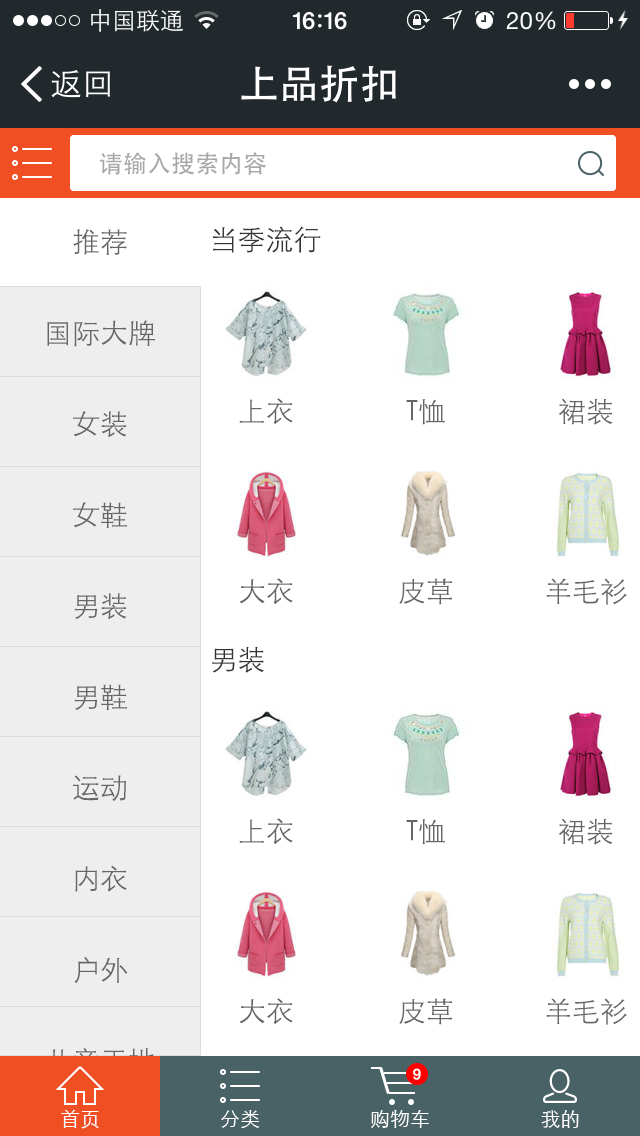
<style>
.page{position:relative;width:640px;height:1136px;background:#ffffff}
.page>*{position:absolute;margin:0}
.t1{font:24px "STHeiti";color:#a8a8a8}
.t2{font:28px/91px "STXihei";color:#666666}
.t3{font:28px "STXihei";color:#333333}
.t4{font:28px "STXihei";color:#666666}
.t5{font:15px "Helvetica";color:#ffffff}
.t6{font:20px "STXihei";color:#ffffff}
</style>
<div class="page">
<p class="t1" style="left:100px;top:152px;width:166px;height:23px">请输入搜索内容</p>
<p class="t2" style="left:46px;top:229px;width:110px;height:845px;text-align:center">推荐<br>国际大牌<br>女装<br>女鞋<br>男装<br>男鞋<br>运动<br>内衣<br>户外<br>儿童天地<br>箱包配饰</p>
<p class="t3" style="left:213px;top:226px;width:108px;height:27px">当季流行</p>
<p class="t4" style="left:239px;top:398px;width:54px;height:27px">上衣</p>
<p class="t4" style="left:406px;top:399px;width:39px;height:26px">T恤</p>
<p class="t4" style="left:559px;top:398px;width:54px;height:27px">裙装</p>
<p class="t4" style="left:239px;top:578px;width:54px;height:27px">大衣</p>
<p class="t4" style="left:399px;top:578px;width:53px;height:27px">皮草</p>
<p class="t4" style="left:546px;top:578px;width:81px;height:27px">羊毛衫</p>
<p class="t3" style="left:212px;top:646px;width:52px;height:27px">男装</p>
<p class="t4" style="left:239px;top:818px;width:54px;height:27px">上衣</p>
<p class="t4" style="left:406px;top:819px;width:39px;height:26px">T恤</p>
<p class="t4" style="left:559px;top:818px;width:54px;height:27px">裙装</p>
<p class="t4" style="left:239px;top:998px;width:54px;height:27px">大衣</p>
<p class="t4" style="left:399px;top:998px;width:53px;height:27px">皮草</p>
<p class="t4" style="left:546px;top:998px;width:81px;height:27px">羊毛衫</p>
<p class="t5" style="left:413px;top:1068px;width:8px;height:12px">9</p>
<p class="t6" style="left:61px;top:1109px;width:38px;height:20px">首页</p>
<p class="t6" style="left:221px;top:1110px;width:39px;height:19px">分类</p>
<p class="t6" style="left:371px;top:1109px;width:58px;height:19px">购物车</p>
<p class="t6" style="left:541px;top:1110px;width:38px;height:18px">我的</p>
</div>
